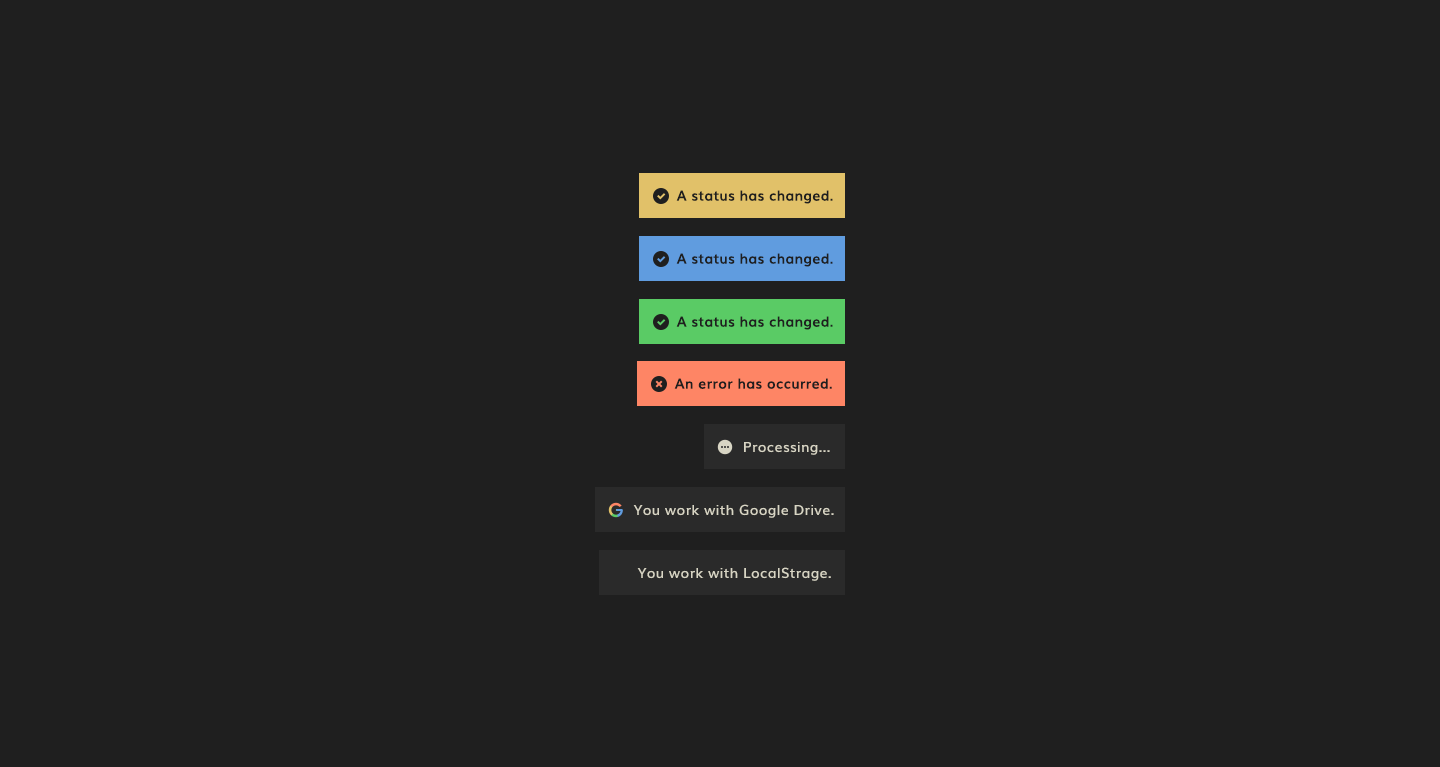
<style>
.page{position:relative;width:1440px;height:767px;background:#1f1f1f}
.page>*{position:absolute;margin:0}
.t1{font:14px "Muli-SemiBold";letter-spacing:0.025em;color:#1f1f1f}
.t2{font:14px "Muli-SemiBold";letter-spacing:0.025em;color:#d8d5c4}
</style>
<div class="page">
<p class="t1" style="left:676px;top:190px;width:157px;height:14px">A status has changed.</p>
<p class="t1" style="left:676px;top:253px;width:157px;height:14px">A status has changed.</p>
<p class="t1" style="left:676px;top:316px;width:157px;height:14px">A status has changed.</p>
<p class="t1" style="left:674px;top:378px;width:158px;height:11px">An error has occurred.</p>
<p class="t2" style="left:744px;top:442px;width:86px;height:13px">Processing...</p>
<p class="t2" style="left:633px;top:504px;width:201px;height:14px">You work with Google Drive.</p>
<p class="t2" style="left:637px;top:567px;width:194px;height:14px">You work with LocalStrage.</p>
</div>
